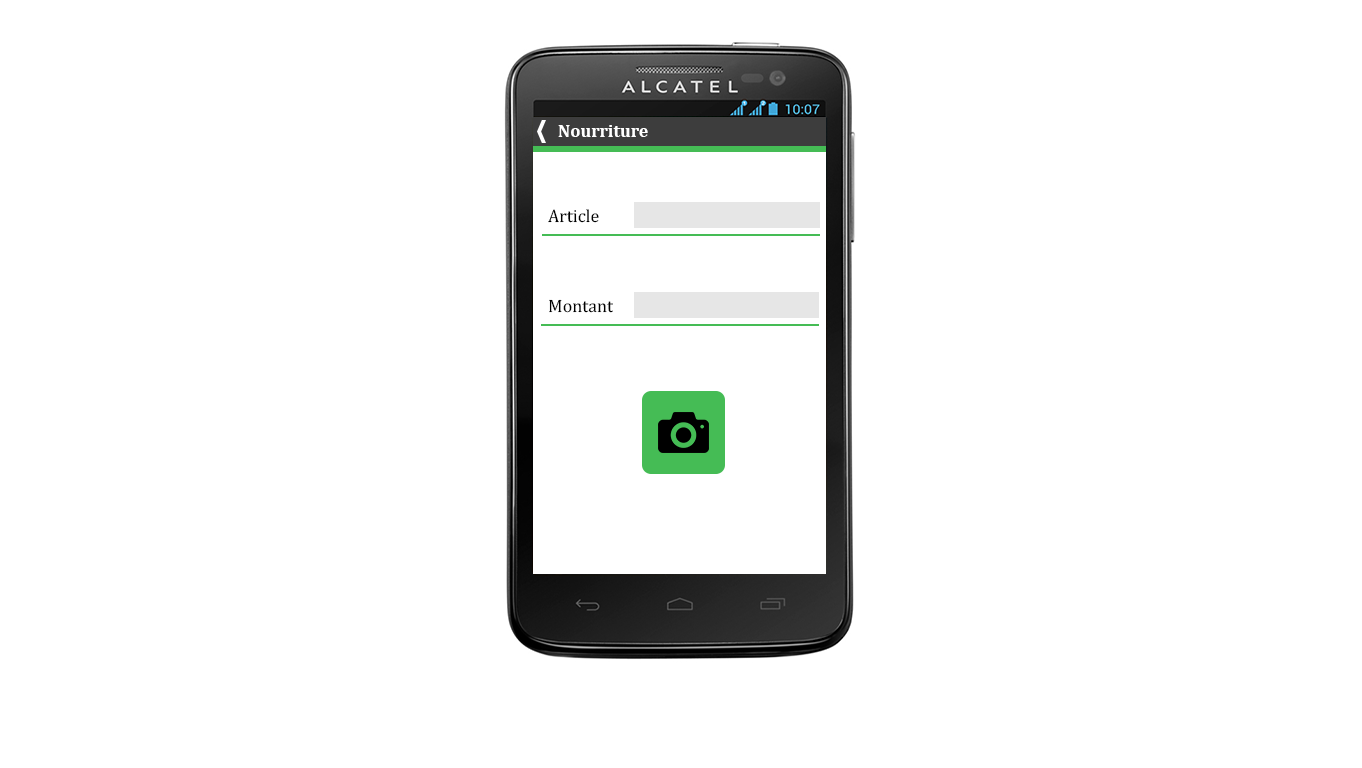
<style>
.page{position:relative;width:1362px;height:768px;background:#ffffff}
.page>*{position:absolute;margin:0}
.t1{font:18px "Cambria-Bold";color:#ffffff}
.t2{font:18px "Cambria";color:#000000}
</style>
<div class="page">
<p class="t1" style="left:558px;top:125px;width:90px;height:12px">Nourriture</p>
<p class="t2" style="left:548px;top:209px;width:51px;height:14px">Article</p>
<p class="t2" style="left:549px;top:299px;width:64px;height:14px">Montant</p>
</div>
